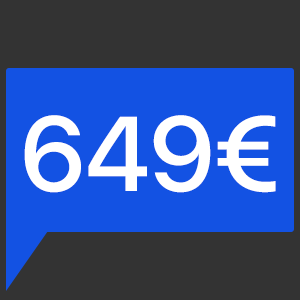
<style>
.page{position:relative;width:300px;height:300px;background:#333333}
.page>*{position:absolute;margin:0}
.t1{font:105px "SFUIDisplay-Medium";color:#ffffff}
</style>
<div class="page">
<p class="t1" style="left:24px;top:115px;width:252px;height:78px">649€</p>
</div>
